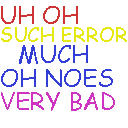
<style>
.page{position:relative;width:128px;height:128px;background:#ffffff}
.page>*{position:absolute;margin:0}
.t1{font:24px "ComicSansMS";color:#ce3434}
.t2{font:20px "ComicSansMS";color:#e6e911}
.t3{font:24px/24px "ComicSansMS";color:#323ed5}
.t4{font:24px "ComicSansMS";color:#ce34c1}
</style>
<div class="page">
<p class="t1" style="left:1px;top:6px;width:77px;height:18px">UH OH</p>
<p class="t2" style="left:1px;top:27px;width:126px;height:15px">SUCH ERROR</p>
<p class="t3" style="left:1px;top:45px;width:112px;height:42px;text-align:center">MUCH <br>OH NOES</p>
<p class="t4" style="left:1px;top:92px;width:114px;height:19px">VERY BAD</p>
</div>
